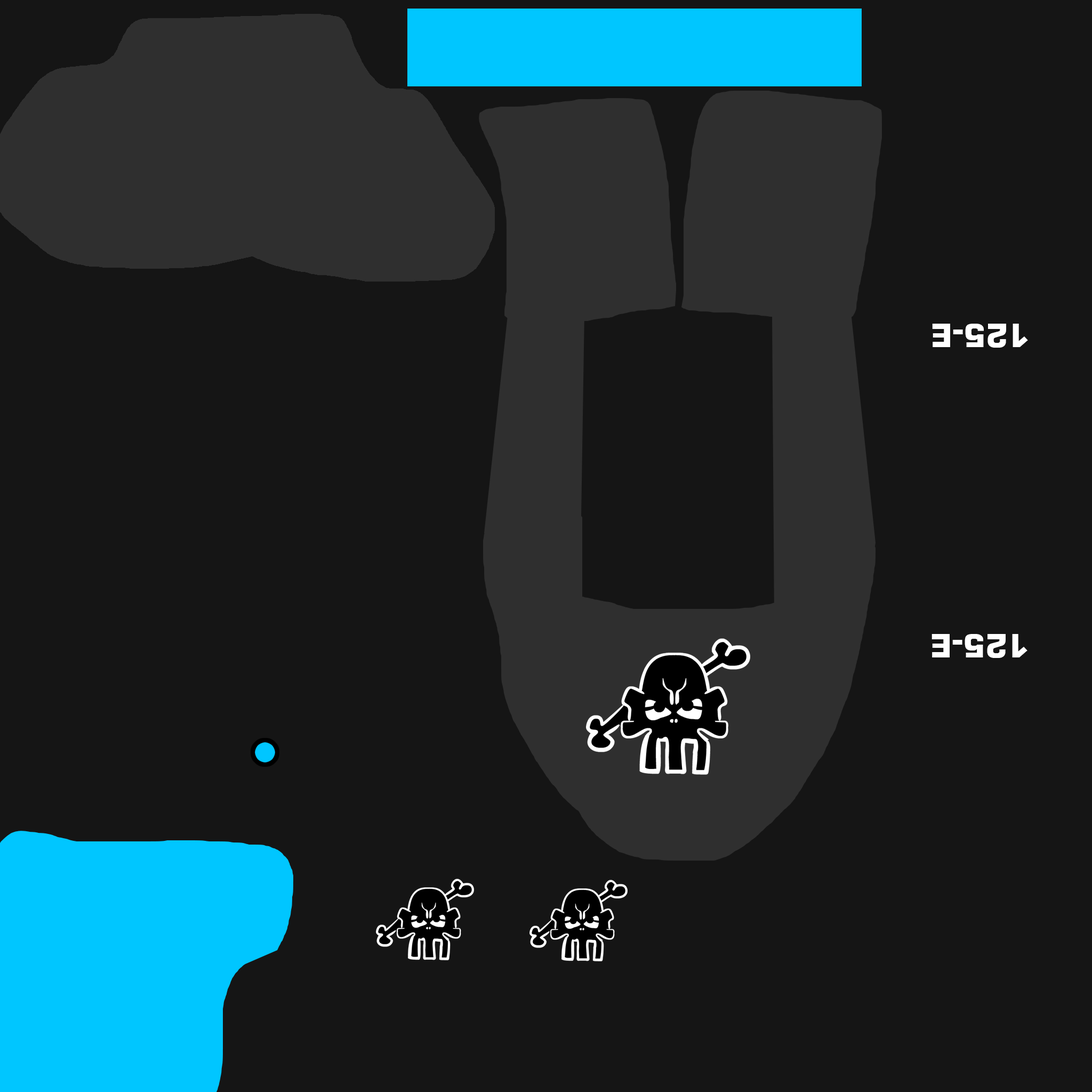
<style>
.page{position:relative;width:1092px;height:1092px;background:#151515}
.page>*{position:absolute;margin:0}
.t1{font:32px "Square721BT-Bold";color:#ffffff}
</style>
<div class="page">
<p class="t1" style="left:932px;top:324px;width:96px;height:24px;rotate:180deg">125-E</p>
<p class="t1" style="left:931px;top:634px;width:96px;height:24px;rotate:180deg">125-E</p>
</div>
